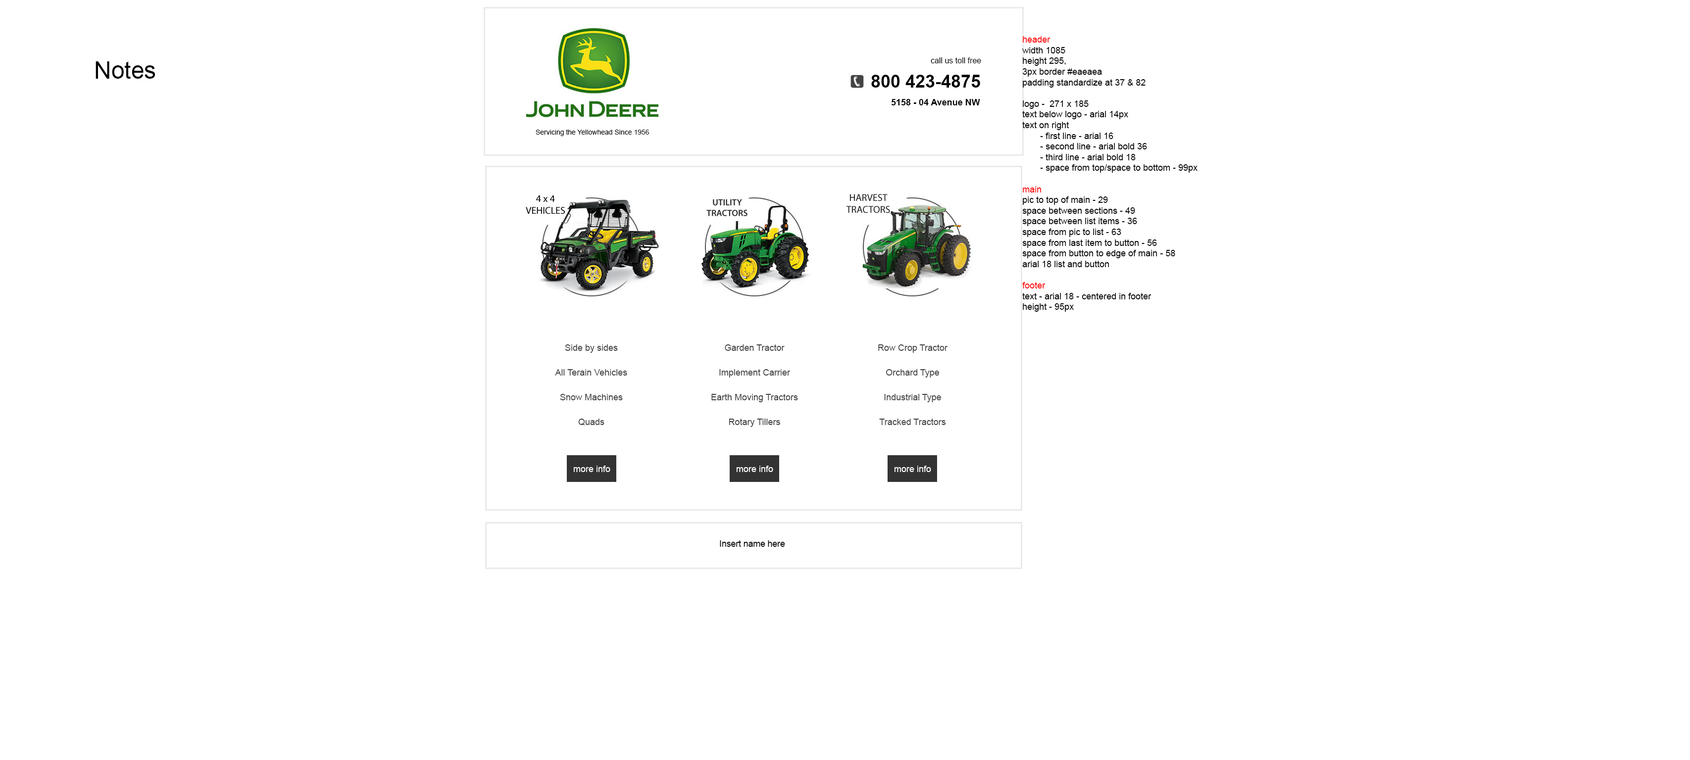
<style>
.page{position:relative;width:1690px;height:760px;background:#ffffff}
.page>*{position:absolute;margin:0}
.t1{font:8.9px "ArialMT";color:#000000}
.t2{font:8.9px "ArialMT";color:#ff0000}
.t3{font:23.8px "ArialMT";color:#000000}
.t4{font:7.9px "ArialMT";color:#000000}
.t5{font:17.8px "Arial-BoldMT";color:#000000}
.t6{font:8.9px "Arial-BoldMT";color:#000000}
.t7{font:6.9px "ArialMT";color:#000000}
.t8{font:9px/24.8px "ArialMT";color:#444444}
.t9{font:9px "ArialMT";color:#ffffff}
</style>
<div class="page">
<p class="t1" style="left:1022px;top:36px;width:176px;height:276px"><span class="t2">header<br></span>width 1085<br>height 295, <br>3px border #eaeaea<br>padding standardize at 37 &amp; 82<br><br>logo -  271 x 185<br>text below logo - arial 14px <br>text on right <br> - first line - arial 16<br> - second line - arial bold 36<br> - third line - arial bold 18<br> - space from top/space to bottom - 99px<br><br><span class="t2">main<br></span>pic to top of main - 29<br>space between sections - 49<br>space between list items - 36<br>space from pic to list - 63<br>space from last item to button - 56<br>space from button to edge of main - 58<br>arial 18 list and button<br><br><span class="t2">footer<br></span>text - arial 18 - centered in footer<br>height - 95px</p>
<p class="t3" style="left:96px;top:61px;width:59px;height:18px">Notes</p>
<p class="t4" style="left:931px;top:57px;width:50px;height:6px">call us toll free</p>
<p class="t5" style="left:871px;top:75px;width:109px;height:13px">800 423-4875</p>
<p class="t6" style="left:891px;top:99px;width:89px;height:6px">5158 - 04 Avenue NW</p>
<p class="t7" style="left:536px;top:129px;width:113px;height:7px">Servicing the Yellowhead Since 1956</p>
<p class="t8" style="left:555px;top:345px;width:72px;height:81px;text-align:center">Side by sides<br>All Terain Vehicles<br>Snow Machines<br>Quads</p>
<p class="t8" style="left:711px;top:345px;width:87px;height:82px;text-align:center">Garden Tractor<br>Implement Carrier<br>Earth Moving Tractors<br>Rotary Tillers</p>
<p class="t8" style="left:878px;top:345px;width:70px;height:80px;text-align:center">Row Crop Tractor<br>Orchard Type<br>Industrial Type<br>Tracked Tractors</p>
<p class="t9" style="left:574px;top:466px;width:36px;height:6px">more info</p>
<p class="t9" style="left:737px;top:466px;width:36px;height:6px">more info</p>
<p class="t9" style="left:895px;top:466px;width:36px;height:6px">more info</p>
<p class="t1" style="left:720px;top:541px;width:65px;height:6px">Insert name here</p>
</div>
